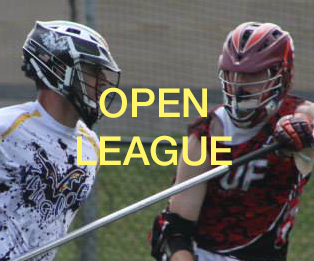
<style>
.page{position:relative;width:314px;height:261px}
.page>*{position:absolute;margin:0}
.t1{font:40px "HelveticaNeue-Medium";color:#fff568}
</style>
<div class="page">
<p class="t1" style="left:77px;top:87px;width:155px;height:79px;text-align:center">OPEN<br>LEAGUE</p>
</div>
